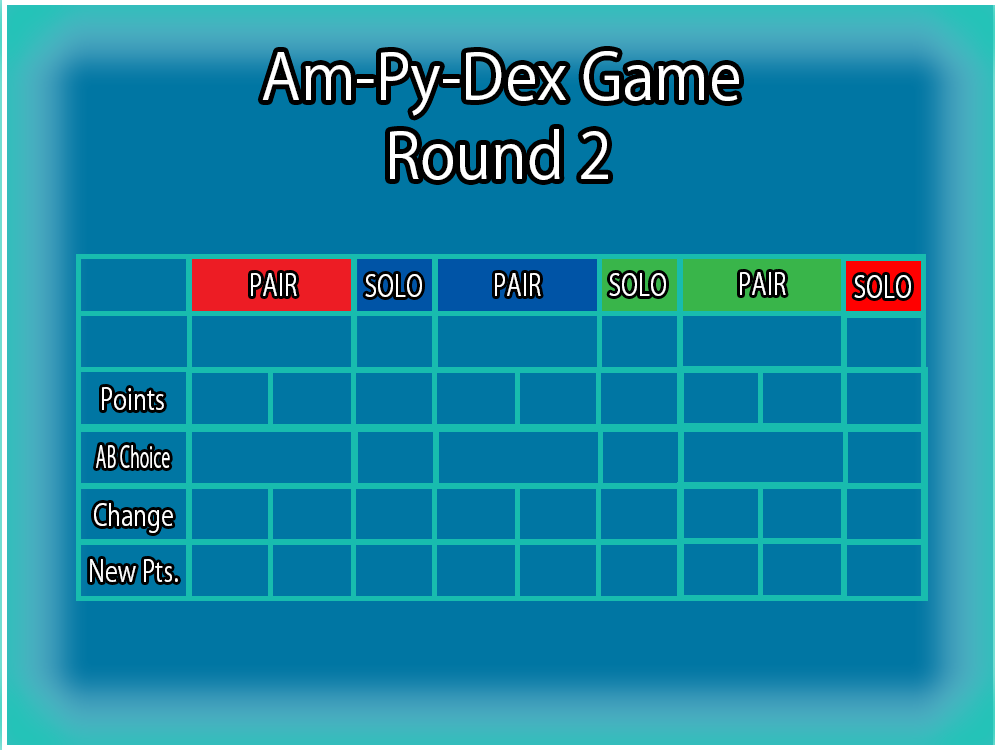
<style>
.page{position:relative;width:1000px;height:750px;background:#0076a3}
.page>*{position:absolute;margin:0}
.t1{font:62.5px "KozGoPr6N-Regular";color:#ffffff;scale:0.97 1}
.t2{font:29.2px "KozGoPr6N-Regular";color:#ffffff;scale:0.8 1}
.t3{font:29.2px "KozGoPr6N-Regular";color:#ffffff;scale:0.56 1}
</style>
<div class="page">
<p class="t1" style="left:262px;top:51px;width:477px;height:65px">Am-Py-Dex Game</p>
<p class="t1" style="left:390px;top:129px;width:218px;height:51px">Round 2</p>
<p class="t2" style="left:251px;top:273px;width:46px;height:23px">PAIR</p>
<p class="t2" style="left:365px;top:274px;width:57px;height:23px">SOLO</p>
<p class="t2" style="left:495px;top:273px;width:46px;height:23px">PAIR</p>
<p class="t2" style="left:609px;top:273px;width:57px;height:23px">SOLO</p>
<p class="t2" style="left:740px;top:272px;width:46px;height:23px">PAIR</p>
<p class="t2" style="left:854px;top:275px;width:57px;height:23px">SOLO</p>
<p class="t2" style="left:102px;top:387px;width:62px;height:23px">Points</p>
<p class="t3" style="left:96px;top:445px;width:74px;height:23px">AB Choice</p>
<p class="t2" style="left:94px;top:503px;width:79px;height:30px">Change</p>
<p class="t2" style="left:90px;top:559px;width:88px;height:23px">New Pts.</p>
</div>
